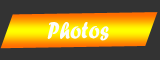
<style>
.page{position:relative;width:160px;height:60px;background:#333333}
.page>*{position:absolute;margin:0}
.t1{font:25px "ForteMT";color:#fbfcfc;scale:0.83 1}
</style>
<div class="page">
<p class="t1" style="left:47px;top:22px;width:62px;height:19px;rotate:-1deg">Photos</p>
</div>
